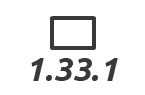
<style>
.page{position:relative;width:145px;height:95px;background:#ffffff}
.page>*{position:absolute;margin:0}
.t1{font:33.3px "Ubuntu-BoldItalic";color:#393939}
</style>
<div class="page">
<p class="t1" style="left:31px;top:58px;width:87px;height:23px">1.33.1</p>
</div>
